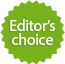
<style>
.page{position:relative;width:65px;height:64px;background:#77b21d}
.page>*{position:absolute;margin:0}
.t1{font:16px/14px "MyriadPro-Regular";letter-spacing:-0.025em;color:#ffffff}
</style>
<div class="page">
<p class="t1" style="left:10px;top:19px;width:45px;height:26px;text-align:center">Editor’s<br>choice</p>
</div>
